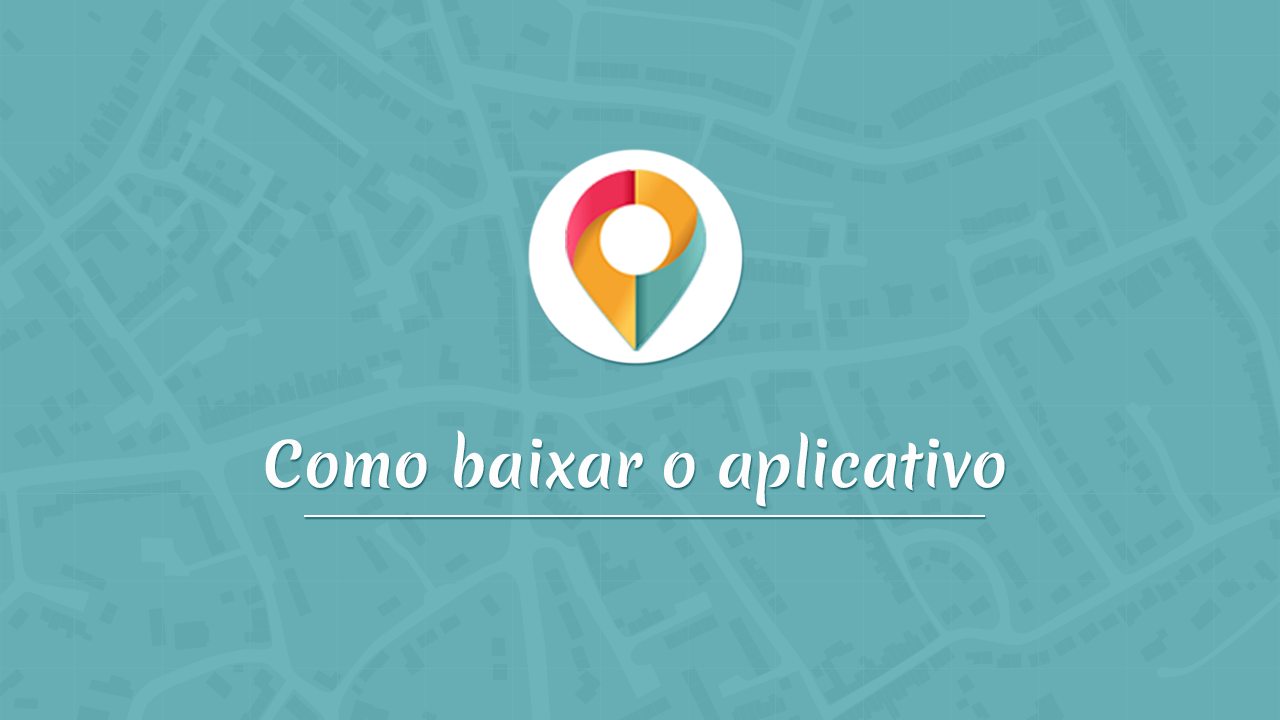
<style>
.page{position:relative;width:1280px;height:720px;background:#67aeb4}
.page>*{position:absolute;margin:0}
.t1{font:59.3px "MeriendaOne-Regular";color:#fdfdfd}
</style>
<div class="page">
<p class="t1" style="left:265px;top:430px;width:740px;height:77px">Como baixar o aplicativo</p>
</div>
